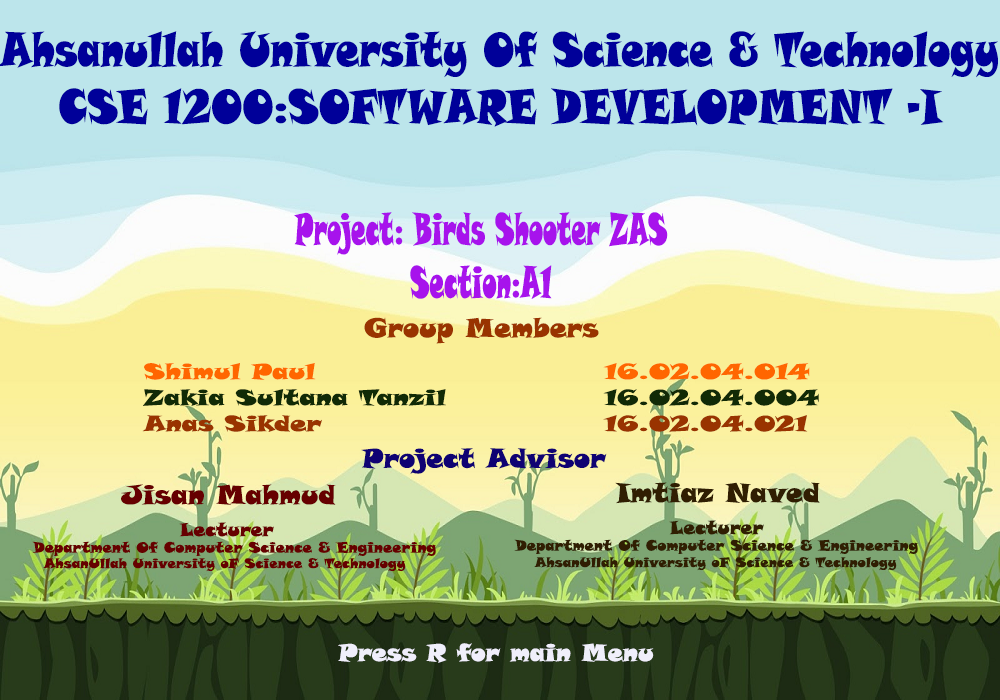
<style>
.page{position:relative;width:1000px;height:700px}
.page>*{position:absolute;margin:0}
.t1{font:35.6px "SnapITC-Regular";color:#000099;scale:0.78 1}
.t2{font:33.2px "SnapITC-Regular";color:#a713ec;scale:0.53 1}
.t3{font:26.7px "SnapITC-Regular";color:#993300}
.t4{font:16.3px "SnapITC-Regular";color:#112a06;scale:1.18 1}
.t5{font:16.3px "SnapITC-Regular";color:#ff6600;scale:1.18 1}
.t6{font:16.3px "SnapITC-Regular";color:#993300;scale:1.18 1}
.t7{font:26.7px "SnapITC-Regular";color:#0f0273}
.t8{font:26.7px "SnapITC-Regular";color:#660000}
.t9{font:18.7px "SnapITC-Regular";color:#660000}
.t10{font:26.7px "SnapITC-Regular";color:#301e02}
.t11{font:18.7px "SnapITC-Regular";color:#301e02}
.t12{font:14.7px "SnapITC-Regular";color:#660000}
.t13{font:14.7px "SnapITC-Regular";color:#301e02}
.t14{font:13.3px "SnapITC-Regular";color:#660000}
.t15{font:13.3px "SnapITC-Regular";color:#301e02}
.t16{font:24px "SnapITC-Regular";color:#f0effb}
</style>
<div class="page">
<p class="t1" style="left:0px;top:31px;width:998px;height:96px;text-align:center">Ahsanullah University Of Science &amp; Technology<br>CSE 1200:SOFTWARE DEVELOPMENT -I</p>
<p class="t2" style="left:294px;top:212px;width:374px;height:87px;text-align:center">Project: Birds Shooter ZAS<br>Section:A1</p>
<p class="t3" style="left:364px;top:317px;width:235px;height:27px">Group Members</p>
<p class="t4" style="left:142px;top:363px;width:677px;height:69px"><span class="t5">Shimul Paul       16.02.04.014  <br></span>Zakia Sultana Tanzil    16.02.04.004<br><span class="t6">Anas Sikder       16.02.04.021</span></p>
<p class="t7" style="left:361px;top:448px;width:246px;height:26px"><span class="t3">       </span>Project Advisor</p>
<p class="t8" style="left:121px;top:484px;width:215px;height:53px">Jisan Mahmud<br>   <span class="t9">Lecturer</span></p>
<p class="t10" style="left:615px;top:482px;width:205px;height:53px">Imtiaz Naved<br>        <span class="t11">Lecturer</span></p>
<p class="t12" style="left:32px;top:541px;width:404px;height:15px">Department Of Computer Science &amp; Engineering</p>
<p class="t13" style="left:514px;top:539px;width:404px;height:15px">Department Of Computer Science &amp; Engineering</p>
<p class="t14" style="left:43px;top:558px;width:363px;height:14px">AhsanUllah University oF Science &amp; Technology</p>
<p class="t15" style="left:534px;top:557px;width:363px;height:14px">AhsanUllah University oF Science &amp; Technology</p>
<p class="t16" style="left:338px;top:643px;width:316px;height:20px">Press R for main Menu</p>
</div>
